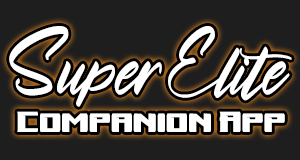
<style>
.page{position:relative;width:300px;height:160px;background:#1e1e1e}
.page>*{position:absolute;margin:0}
.t1{font:100px "Nighttime-Regular";color:#ffffff;scale:0.96 1}
.t2{font:30px "moronickdemo";color:#ffffff;scale:2 1}
</style>
<div class="page">
<p class="t1" style="left:9px;top:26px;width:283px;height:81px">SuperElite</p>
<p class="t2" style="left:17px;top:111px;width:268px;height:21px">Companion App</p>
</div>
